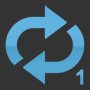
<style>
.page{position:relative;width:90px;height:90px;background:#333333}
.page>*{position:absolute;margin:0}
.t1{font:20.8px "Arial-BoldMT";color:#60b2dd}
</style>
<div class="page">
<p class="t1" style="left:76px;top:69px;width:8px;height:16px">1</p>
</div>
